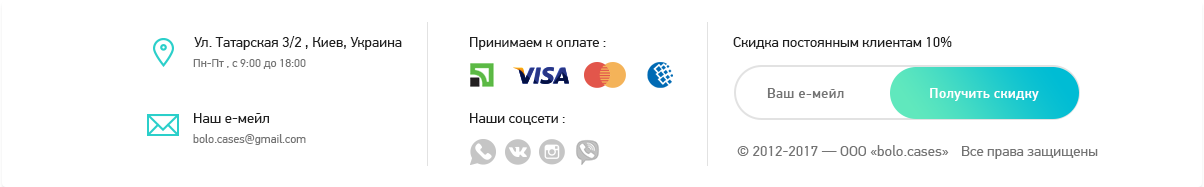
<style>
.page{position:relative;width:1204px;height:187px;background:#ffffff}
.page>*{position:absolute;margin:0}
.t1{font:15px "PFDinTextPro-Regular";color:#212121}
.t2{font:12px "PFDinTextPro-Regular";color:#747474}
.t3{font:14px "PFDinTextPro-Medium";letter-spacing:0.025em;color:#747474}
.t4{font:14px "PFDinTextPro-Medium";letter-spacing:0.025em;color:#fbfbfb}
.t5{font:15px "PFDinTextPro-Regular";color:#747474}
</style>
<div class="page">
<p class="t1" style="left:194px;top:36px;width:208px;height:14px">Ул. Татарская 3/2 , Киев, Украина</p>
<p class="t1" style="left:470px;top:37px;width:136px;height:13px">Принимаем к оплате :</p>
<p class="t1" style="left:733px;top:36px;width:219px;height:13px">Скидка постоянным клиентам 10%</p>
<p class="t2" style="left:193px;top:59px;width:113px;height:10px">Пн-Пт , с 9:00 до 18:00</p>
<p class="t3" style="left:767px;top:88px;width:77px;height:10px">Ваш е-мейл</p>
<p class="t4" style="left:930px;top:88px;width:109px;height:13px">Получить скидку</p>
<p class="t1" style="left:194px;top:113px;width:75px;height:10px">Наш е-мейл</p>
<p class="t1" style="left:470px;top:113px;width:95px;height:12px">Наши соцсети :</p>
<p class="t2" style="left:193px;top:134px;width:113px;height:11px">bolo.cases@gmail.com</p>
<p class="t5" style="left:737px;top:145px;width:212px;height:11px">© 2012-2017 — ООО «bolo.cases»</p>
<p class="t5" style="left:962px;top:146px;width:136px;height:13px">Все права защищены</p>
</div>
